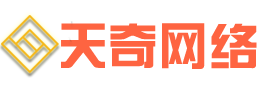
<style>
.page{position:relative;width:260px;height:90px;background:#ffffff}
.page>*{position:absolute;margin:0}
.t1{font:50px "FZZYJW--GB1-0";letter-spacing:0.005em;color:#fe6441}
</style>
<div class="page">
<p class="t1" style="left:61px;top:23px;width:196px;height:46px">天奇网络</p>
</div>
